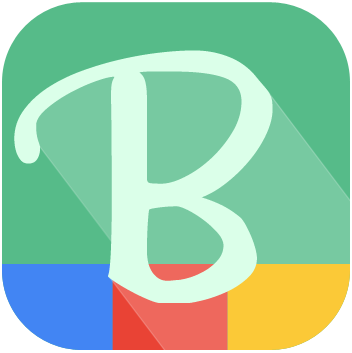
<style>
.page{position:relative;width:352px;height:353px;background:#56bb89}
.page>*{position:absolute;margin:0}
.t1{font:400.1px "Billabong";color:#dbffe9}
</style>
<div class="page">
<p class="t1" style="left:14px;top:50px;width:259px;height:253px">B</p>
</div>
